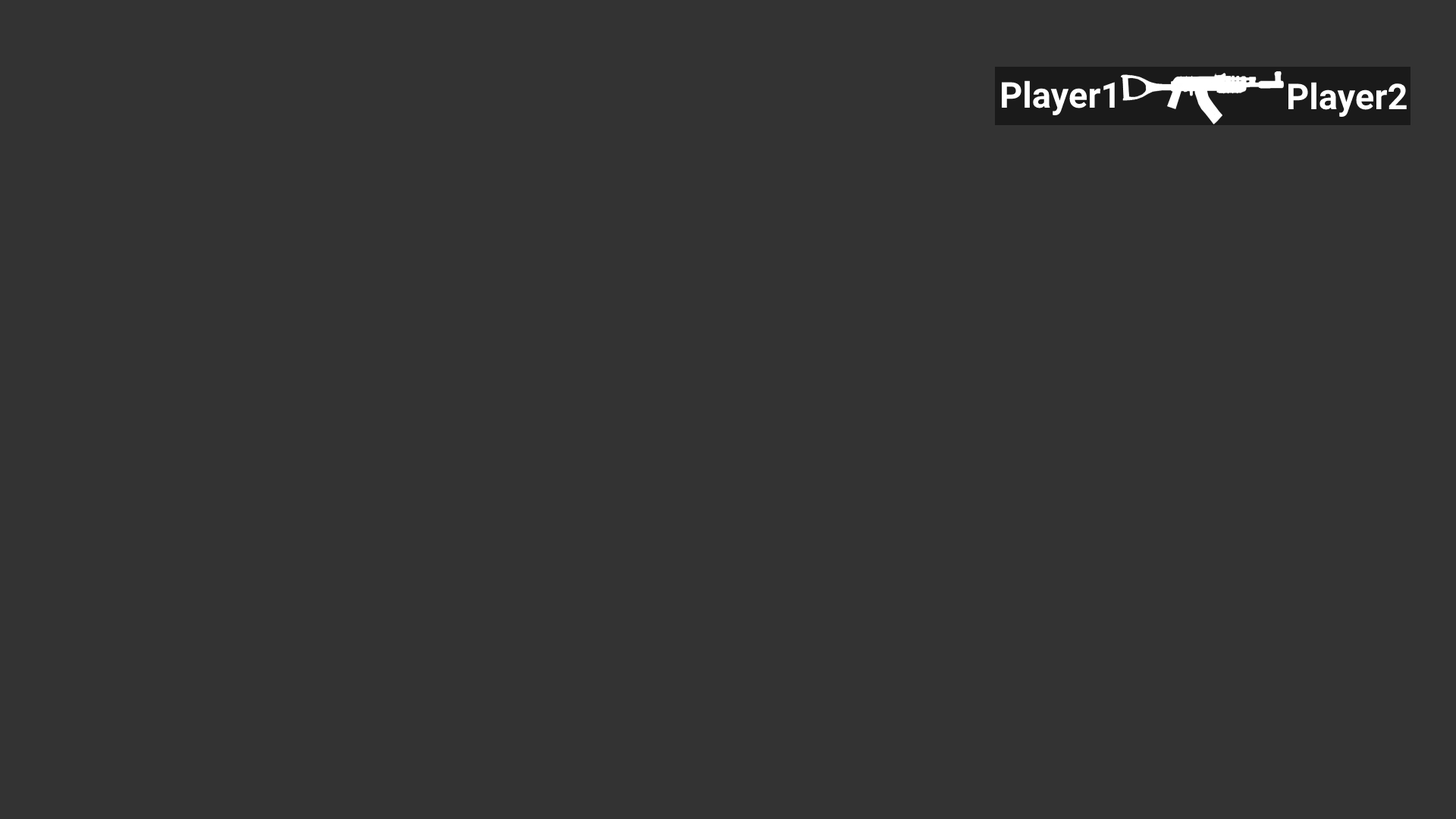
<style>
.page{position:relative;width:1456px;height:819px;background:#333333}
.page>*{position:absolute;margin:0}
.t1{font:35.6px "Roboto-Bold";color:#ffffff}
</style>
<div class="page">
<p class="t1" style="left:1001px;top:80px;width:114px;height:36px">Player1</p>
<p class="t1" style="left:1288px;top:82px;width:119px;height:36px">Player2</p>
</div>
